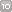
<style>
.page{position:relative;width:12px;height:12px;background:#aba5a5}
.page>*{position:absolute;margin:0}
.t1{font:8px "Kroeger0553";color:#ffffff}
</style>
<div class="page">
<p class="t1" style="left:2px;top:4px;width:8px;height:5px">10</p>
</div>
